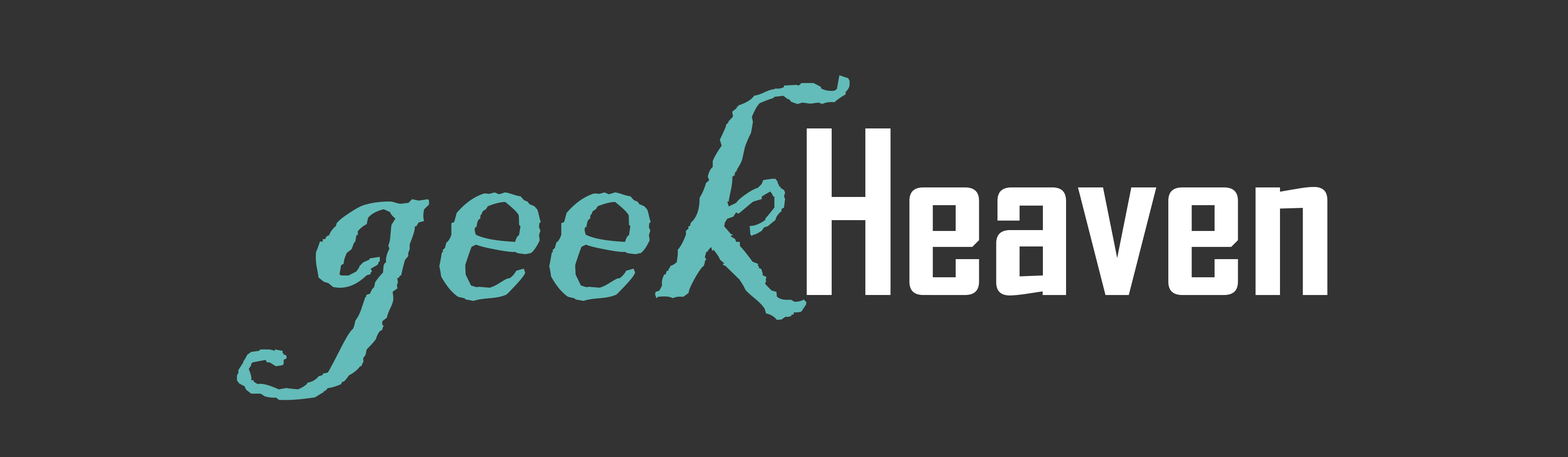
<style>
.page{position:relative;width:1568px;height:457px;background:#333333}
.page>*{position:absolute;margin:0}
.t1{font:218.2px "AgencyFB-Bold";color:#ffffff}
.t2{font:363.7px "BlackadderITC-Regular";color:#63bcb9}
</style>
<div class="page">
<p class="t1" style="left:237px;top:75px;width:1091px;height:326px"><span class="t2">geek</span>Heaven</p>
</div>
